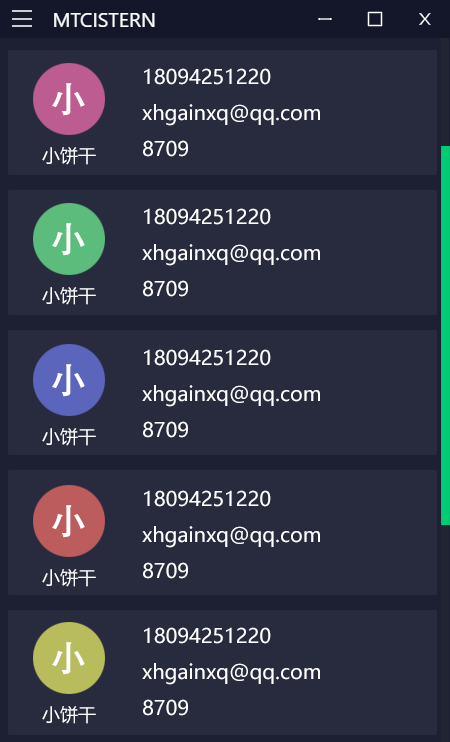
<style>
.page{position:relative;width:450px;height:742px;background:#282b3d}
.page>*{position:absolute;margin:0}
.t1{font:20px/36px "MicrosoftYaHei";color:#ffffff}
.t2{font:36px "AdobeHeitiStd-Regular";color:#ffffff;text-transform:uppercase;font-weight:bold}
.t3{font:18px "MicrosoftYaHei";color:#ffffff}
</style>
<div class="page">
<p class="t1" style="left:142px;top:68px;width:178px;height:89px;text-align:justify">18094251220<br>xhgainxq@qq.com<br>8709</p>
<p class="t2" style="left:52px;top:83px;width:33px;height:33px">小</p>
<p class="t3" style="left:42px;top:147px;width:54px;height:18px">小饼干</p>
<p class="t1" style="left:142px;top:208px;width:178px;height:89px;text-align:justify">18094251220<br>xhgainxq@qq.com<br>8709</p>
<p class="t2" style="left:52px;top:223px;width:33px;height:33px">小</p>
<p class="t3" style="left:42px;top:287px;width:54px;height:18px">小饼干</p>
<p class="t1" style="left:142px;top:349px;width:178px;height:89px;text-align:justify">18094251220<br>xhgainxq@qq.com<br>8709</p>
<p class="t2" style="left:52px;top:364px;width:33px;height:33px">小</p>
<p class="t3" style="left:42px;top:428px;width:54px;height:18px">小饼干</p>
<p class="t1" style="left:142px;top:490px;width:178px;height:89px;text-align:justify">18094251220<br>xhgainxq@qq.com<br>8709</p>
<p class="t2" style="left:52px;top:505px;width:33px;height:33px">小</p>
<p class="t3" style="left:42px;top:569px;width:54px;height:18px">小饼干</p>
<p class="t1" style="left:142px;top:627px;width:178px;height:89px;text-align:justify">18094251220<br>xhgainxq@qq.com<br>8709</p>
<p class="t2" style="left:52px;top:642px;width:33px;height:33px">小</p>
<p class="t3" style="left:42px;top:706px;width:54px;height:18px">小饼干</p>
</div>
